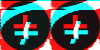
<style>
.page{position:relative;width:100px;height:50px;background:#191111}
.page>*{position:absolute;margin:0}
.t1{font:48px "Champagne&Limousines-Bold";letter-spacing:0.02em}
</style>
<div class="page">
<p class="t1" style="left:13px;top:14px;width:24px;height:23px">+</p>
<p class="t1" style="left:63px;top:14px;width:24px;height:23px">+</p>
</div>
